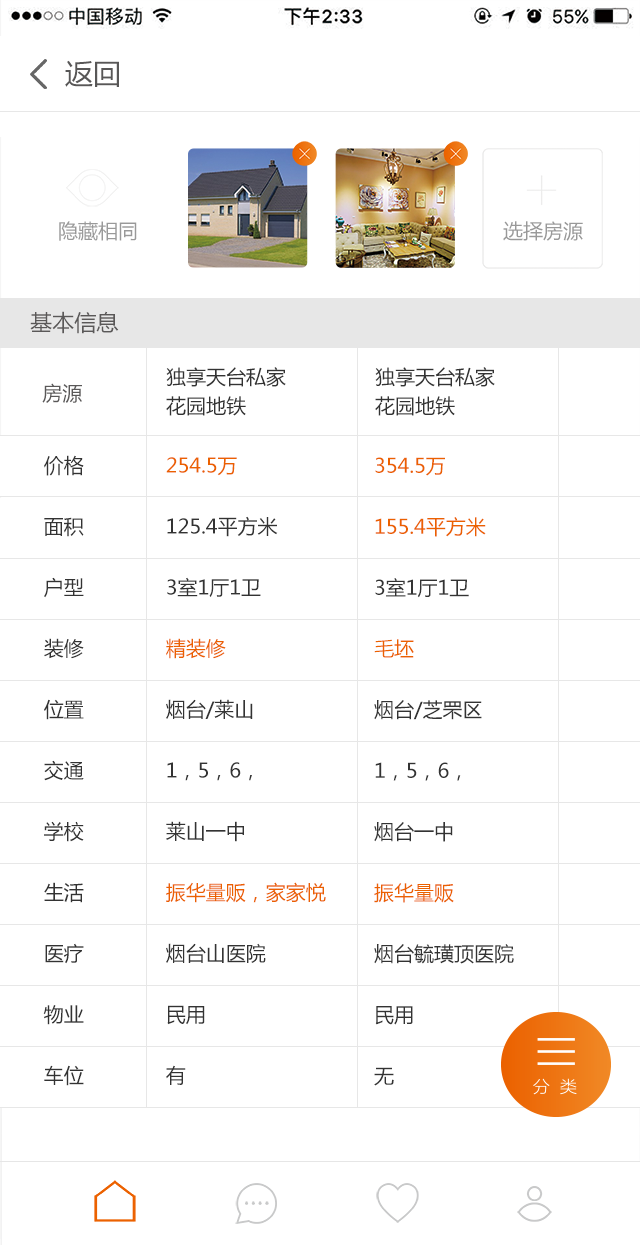
<style>
.page{position:relative;width:640px;height:1245px;background:#ffffff}
.page>*{position:absolute;margin:0}
.t1{font:28px "MicrosoftYaHei";color:#585757}
.t2{font:20px "MicrosoftYaHei";color:#999999}
.t3{font:22px "MicrosoftYaHei";color:#5a5858}
.t4{font:20px/29px "MicrosoftYaHei";color:#333333}
.t5{font:20px "MicrosoftYaHei";color:#5a5858}
.t6{font:20px/61px "MicrosoftYaHei";color:#333333}
.t7{font:20px/61px "MicrosoftYaHei";color:#eb6100}
</style>
<div class="page">
<p class="t1" style="left:65px;top:60px;width:54px;height:27px">返回</p>
<p class="t2" style="left:59px;top:221px;width:78px;height:20px">隐藏相同</p>
<p class="t2" style="left:503px;top:221px;width:80px;height:20px">选择房源</p>
<p class="t3" style="left:30px;top:311px;width:89px;height:23px">基本信息</p>
<p class="t4" style="left:166px;top:367px;width:120px;height:49px">独享天台私家<br>花园地铁</p>
<p class="t4" style="left:375px;top:367px;width:120px;height:49px">独享天台私家<br>花园地铁</p>
<p class="t5" style="left:42px;top:383px;width:40px;height:20px">房源</p>
<p class="t6" style="left:43px;top:455px;width:41px;height:631px">价格<br>面积<br>户型<br>装修<br>位置<br>交通<br>学校<br>生活<br>医疗<br>物业<br>车位</p>
<p class="t6" style="left:166px;top:457px;width:160px;height:628px"><span class="t7">254.5万<br></span>125.4平方米<br>3室1厅1卫<br><span class="t7">精装修<br></span>烟台/莱山<br>1，5，6，<br>莱山一中<br><span class="t7">振华量贩，家家悦<br></span>烟台山医院<br>民用<br>有</p>
<p class="t6" style="left:374px;top:457px;width:140px;height:629px"><span class="t7">354.5万<br>155.4平方米<br></span>3室1厅1卫<br><span class="t7">毛坯<br></span>烟台/芝罘区<br>1，5，6，<br>烟台一中<br><span class="t7">振华量贩<br></span>烟台毓璜顶医院<br>民用<br>无</p>
</div>
